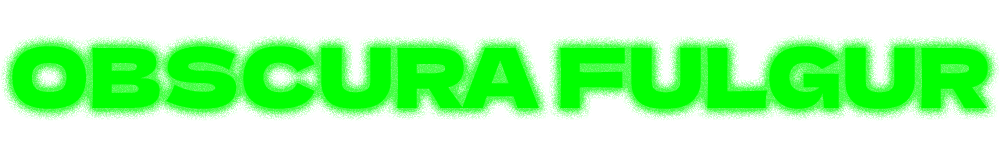
<style>
.page{position:relative;width:1000px;height:157px;background:#ffffff}
.page>*{position:absolute;margin:0}
.t1{font:82.7px "DelaGothicOne-Regular";color:#00ff00}
</style>
<div class="page">
<p class="t1" style="left:12px;top:46px;width:976px;height:63px">OBSCURA FULGUR</p>
</div>
